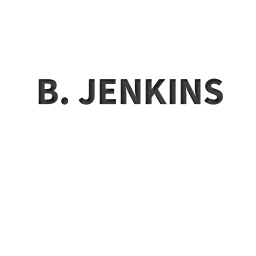
<style>
.page{position:relative;width:256px;height:256px;background:#ffffff}
.page>*{position:absolute;margin:0}
.t1{font:38px "SourceSansRoman-Bold";color:#3f413e}
</style>
<div class="page">
<p class="t1" style="left:38px;top:78px;width:185px;height:27px">B. JENKINS</p>
</div>
